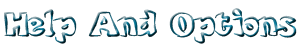
<style>
.page{position:relative;width:300px;height:50px;background:#ffffff}
.page>*{position:absolute;margin:0}
.t1{font:46px "bobotoh"}
</style>
<div class="page">
<p class="t1" style="left:4px;top:8px;width:293px;height:36px">Help And Options</p>
</div>
